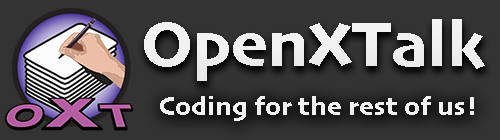
<style>
.page{position:relative;width:500px;height:140px;background:#333333}
.page>*{position:absolute;margin:0}
.t1{font:66.1px "Skia-Bold";color:#f1f1f1}
.t2{font:27px "Skia-Bold";color:#f1f1f1}
</style>
<div class="page">
<p class="t1" style="left:144px;top:19px;width:341px;height:62px">OpenXTalk</p>
<p class="t2" style="left:160px;top:96px;width:314px;height:25px">Coding for the rest of us!</p>
</div>
